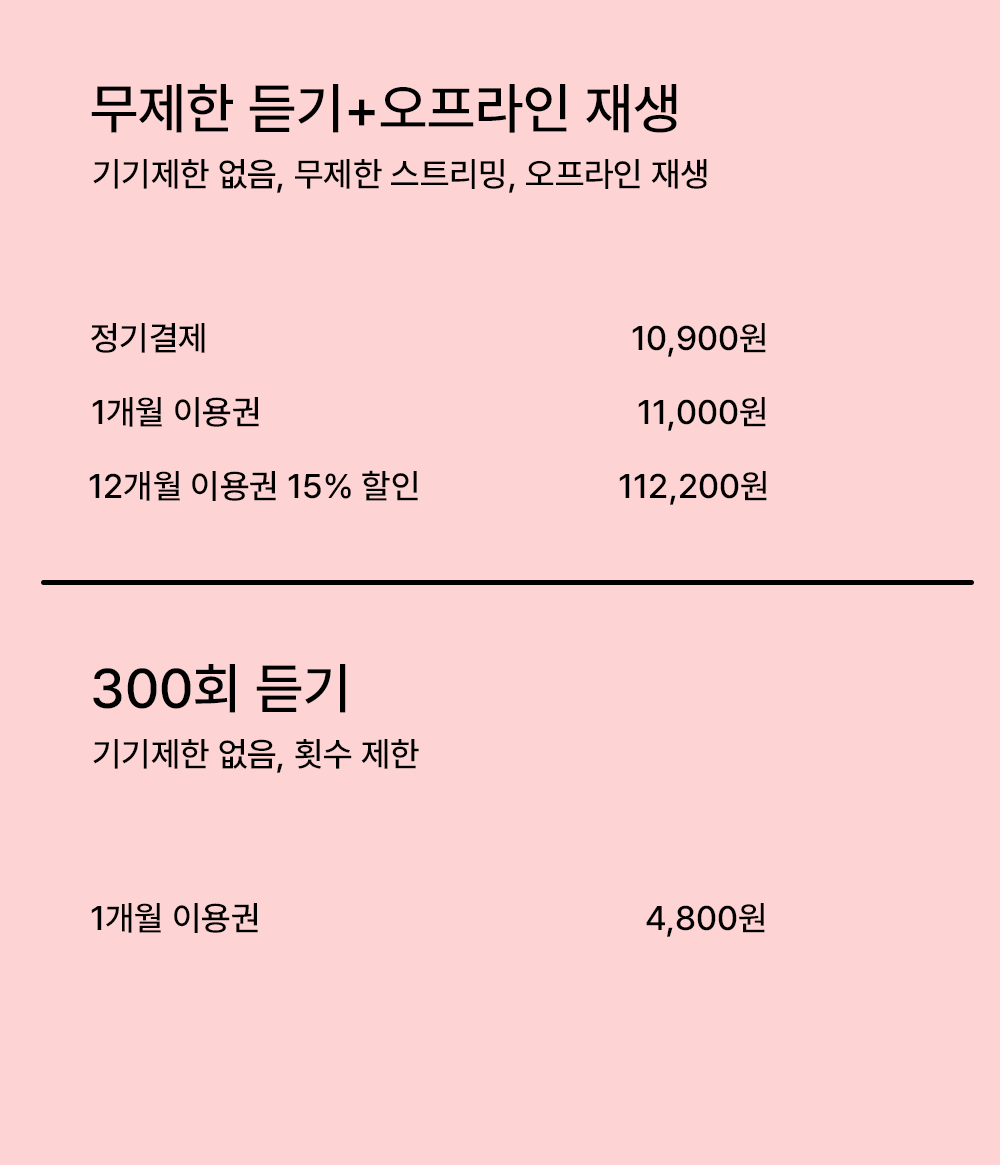
<style>
.page{position:relative;width:1000px;height:1165px;background:#fdd3d3}
.page>*{position:absolute;margin:0}
.t1{font:55.6px "Pretendard-Medium";color:#000000}
.t2{font:34px "Pretendard-Medium";color:#000000}
</style>
<div class="page">
<p class="t1" style="left:91px;top:84px;width:586px;height:49px">무제한 듣기+오프라인 재생</p>
<p class="t2" style="left:93px;top:159px;width:614px;height:34px">기기제한 없음, 무제한 스트리밍, 오프라인 재생</p>
<p class="t2" style="left:91px;top:323px;width:114px;height:30px">정기결제</p>
<p class="t2" style="left:632px;top:323px;width:134px;height:34px">10,900원</p>
<p class="t2" style="left:92px;top:397px;width:167px;height:30px">1개월 이용권</p>
<p class="t2" style="left:638px;top:397px;width:128px;height:34px">11,000원</p>
<p class="t2" style="left:89px;top:470px;width:329px;height:31px">12개월 이용권 15% 할인</p>
<p class="t2" style="left:619px;top:471px;width:148px;height:34px">112,200원</p>
<p class="t1" style="left:93px;top:664px;width:253px;height:49px">300회 듣기</p>
<p class="t2" style="left:93px;top:739px;width:326px;height:34px">기기제한 없음, 횟수 제한</p>
<p class="t2" style="left:91px;top:903px;width:167px;height:30px">1개월 이용권</p>
<p class="t2" style="left:646px;top:903px;width:119px;height:34px">4,800원</p>
</div>
